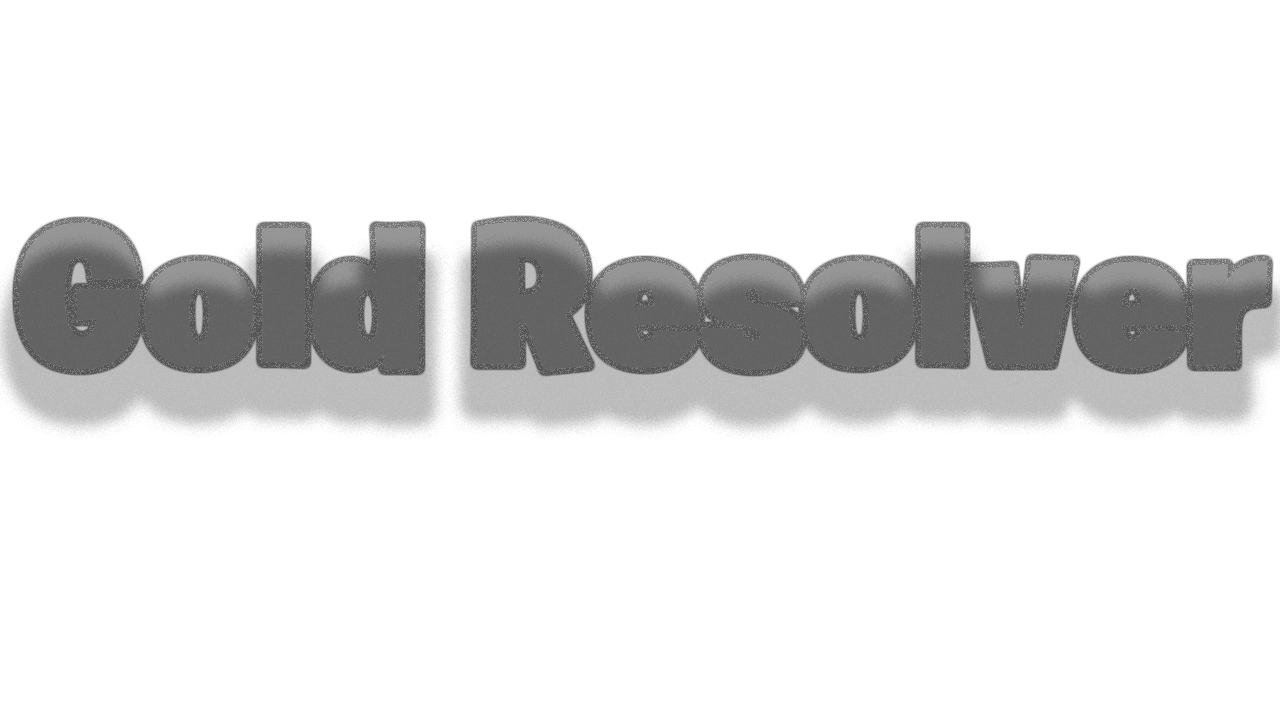
<style>
.page{position:relative;width:1280px;height:720px;background:#ffffff}
.page>*{position:absolute;margin:0}
.t1{font:200px "BurbankBigRegular-Black";color:#656565}
</style>
<div class="page">
<p class="t1" style="left:18px;top:222px;width:1249px;height:148px">Gold Resolver</p>
</div>
